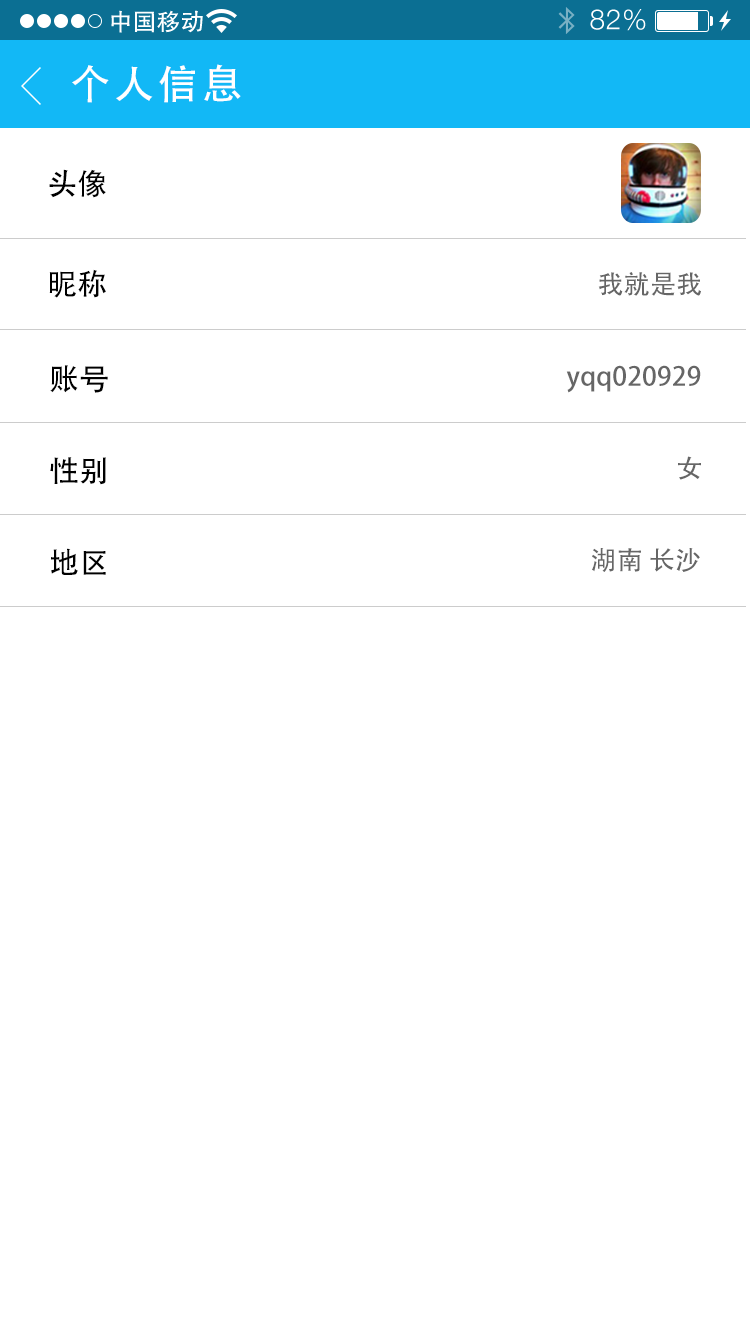
<style>
.page{position:relative;width:750px;height:1334px;background:#ffffff}
.page>*{position:absolute;margin:0}
.t1{font:40px "AdobeHeitiStd-Regular";letter-spacing:0.104em;color:#ffffff}
.t2{font:30px "AdobeHeitiStd-Regular";letter-spacing:0.01em;color:#000000}
.t3{font:26px "AdobeHeitiStd-Regular";letter-spacing:0.01em;color:#666666}
</style>
<div class="page">
<p class="t1" style="left:72px;top:64px;width:169px;height:39px">个人信息</p>
<p class="t2" style="left:49px;top:169px;width:57px;height:29px">头像</p>
<p class="t2" style="left:49px;top:269px;width:57px;height:29px">昵称</p>
<p class="t3" style="left:598px;top:272px;width:103px;height:24px">我就是我</p>
<p class="t2" style="left:50px;top:365px;width:58px;height:28px">账号</p>
<p class="t3" style="left:566px;top:365px;width:135px;height:28px">yqq020929</p>
<p class="t2" style="left:50px;top:457px;width:56px;height:28px">性别</p>
<p class="t3" style="left:678px;top:456px;width:23px;height:24px">女</p>
<p class="t2" style="left:51px;top:548px;width:55px;height:27px">地区</p>
<p class="t3" style="left:592px;top:548px;width:108px;height:24px">湖南 长沙</p>
</div>
